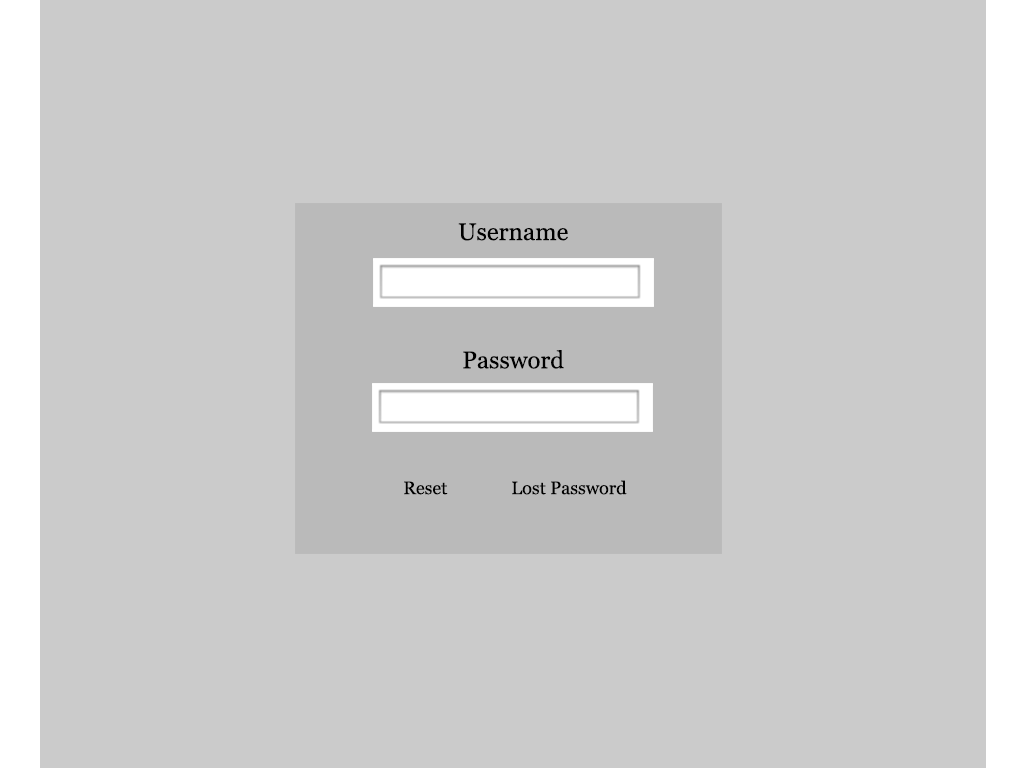
<style>
.page{position:relative;width:1024px;height:768px;background:#cbcbcb}
.page>*{position:absolute;margin:0}
.t1{font:24px "Georgia";color:#000000}
.t2{font:18px "Georgia";color:#000000}
</style>
<div class="page">
<p class="t1" style="left:458px;top:223px;width:110px;height:18px">Username</p>
<p class="t1" style="left:463px;top:350px;width:101px;height:19px">Password</p>
<p class="t2" style="left:404px;top:480px;width:223px;height:15px">Reset  Lost Password</p>
</div>
